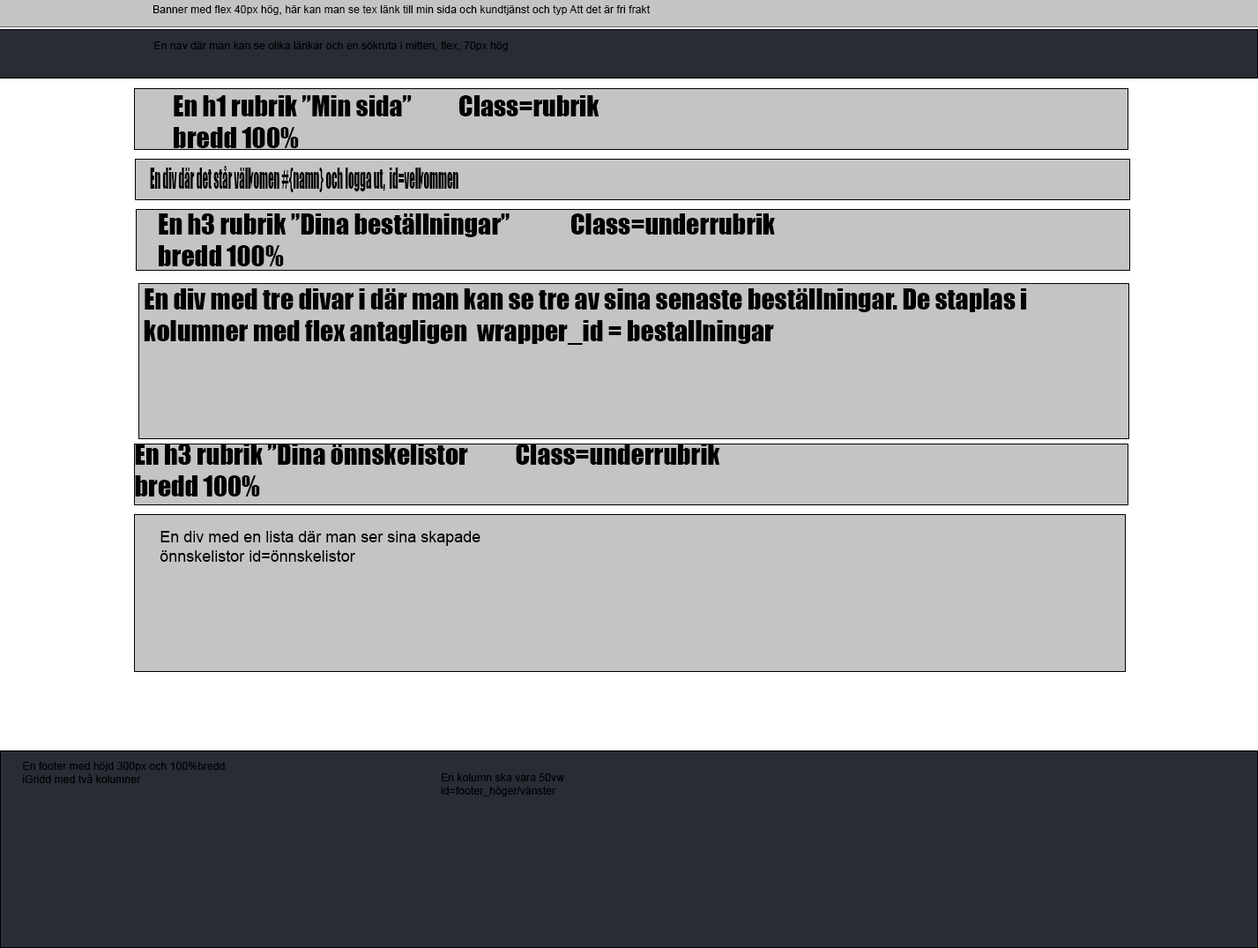
<style>
.page{position:relative;width:1258px;height:948px;background:#c4c4c4}
.page>*{position:absolute;margin:0}
.t1{font:10.8px "ArialMT";color:#000000}
.t2{font:26.4px "Impact";color:#000000}
.t3{font:26.4px "Impact";color:#000000;scale:0.43 1}
.t4{font:15.9px "ArialMT";color:#000000}
</style>
<div class="page">
<p class="t1" style="left:153px;top:5px;width:497px;height:10px">Banner med flex 40px hög, här kan man se tex länk till min sida och kundtjänst och typ Att det är fri frakt</p>
<p class="t1" style="left:154px;top:41px;width:354px;height:10px">En nav där man kan se olika länkar och en sökruta i mitten, flex, 70px hög</p>
<p class="t2" style="left:174px;top:95px;width:426px;height:53px">En h1 rubrik ”Min sida”  Class=rubrik<br>bredd 100%</p>
<p class="t3" style="left:150px;top:166px;width:308px;height:26px">En div där det står välkomen #{namn} och logga ut,  id=velkommen</p>
<p class="t2" style="left:159px;top:213px;width:616px;height:53px">En h3 rubrik ”Dina beställningar”  Class=underrubrik<br>bredd 100%</p>
<p class="t2" style="left:144px;top:288px;width:883px;height:57px">En div med tre divar i där man kan se tre av sina senaste beställningar. De staplas i kolumner med flex antagligen  wrapper_id = bestallningar</p>
<p class="t2" style="left:135px;top:443px;width:585px;height:53px">En h3 rubrik ”Dina önnskelistor  Class=underrubrik<br>bredd 100%</p>
<p class="t4" style="left:160px;top:531px;width:321px;height:31px">En div med en lista där man ser sina skapade önnskelistor id=önnskelistor</p>
<p class="t1" style="left:23px;top:762px;width:202px;height:21px">En footer med höjd 300px och 100%bredd<br>iGridd med två kolumner</p>
<p class="t1" style="left:441px;top:773px;width:123px;height:23px">En kolumn ska vara 50vw id=footer_höger/vänster</p>
</div>
